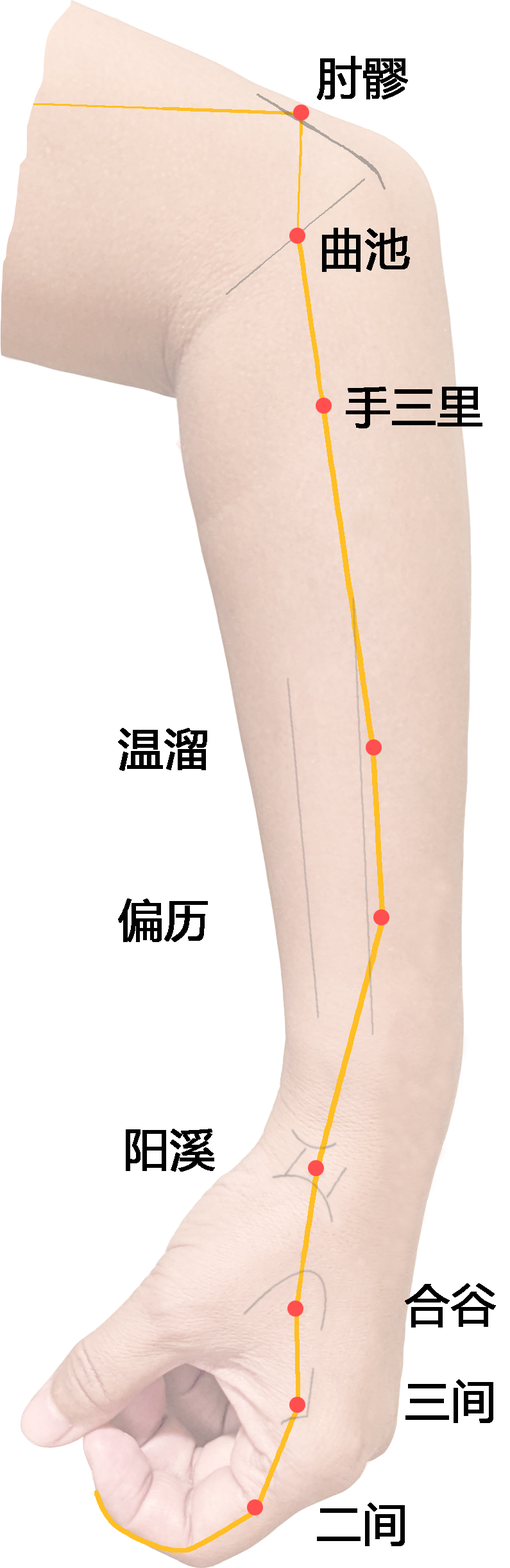
<style>
.page{position:relative;width:510px;height:1568px;background:#ffffff}
.page>*{position:absolute;margin:0}
.t1{font:44.9px "MicrosoftYaHei";color:#000000;font-weight:bold}
</style>
<div class="page">
<p class="t1" style="left:317px;top:56px;width:91px;height:44px">肘髎</p>
<p class="t1" style="left:322px;top:228px;width:88px;height:44px">曲池</p>
<p class="t1" style="left:346px;top:387px;width:136px;height:41px">手三里</p>
<p class="t1" style="left:118px;top:728px;width:89px;height:43px">温溜</p>
<p class="t1" style="left:118px;top:898px;width:90px;height:44px">偏历</p>
<p class="t1" style="left:126px;top:1129px;width:89px;height:43px">阳溪</p>
<p class="t1" style="left:405px;top:1283px;width:91px;height:45px">合谷</p>
<p class="t1" style="left:405px;top:1379px;width:88px;height:44px">三间</p>
<p class="t1" style="left:317px;top:1503px;width:88px;height:43px">二间</p>
</div>
